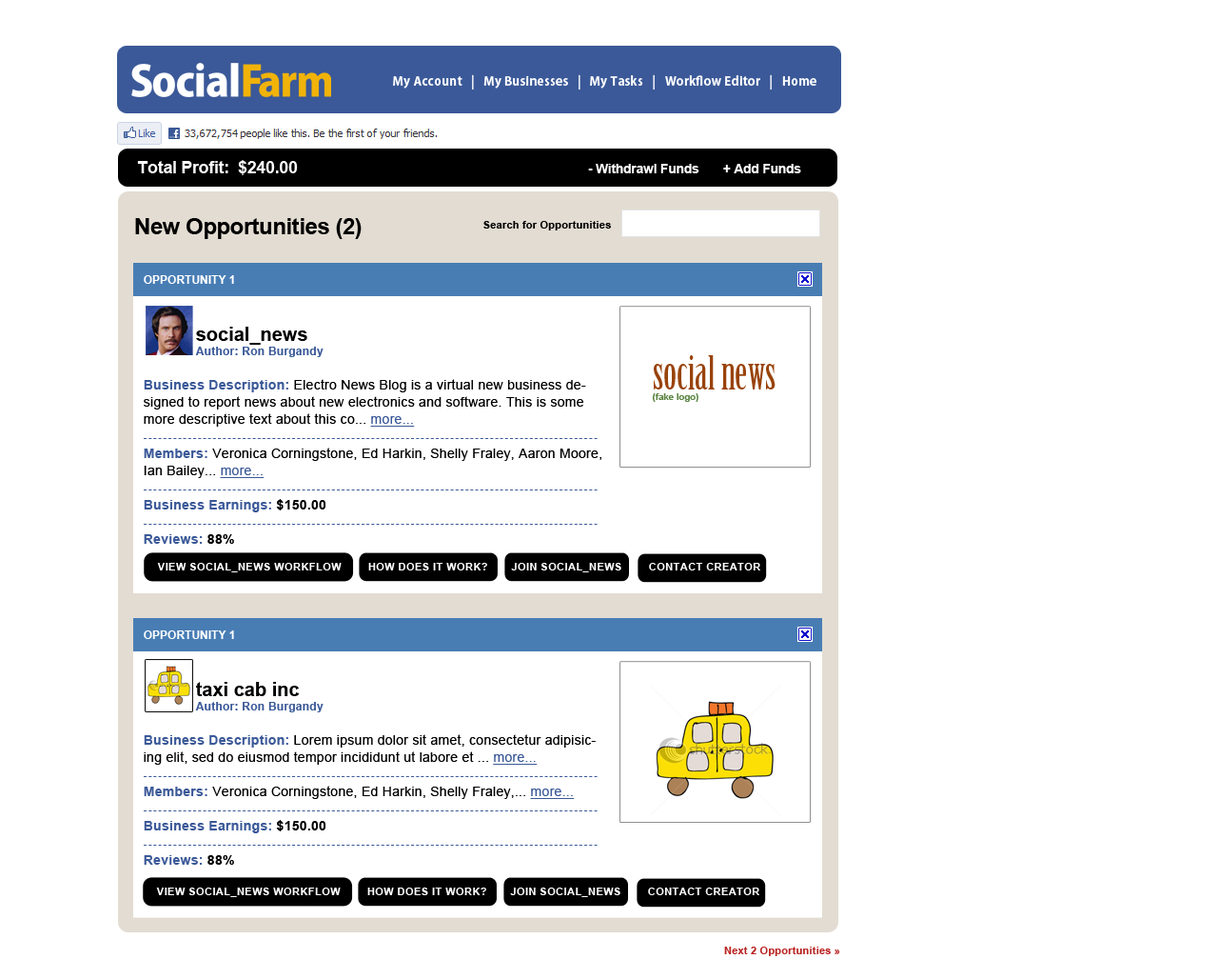
<style>
.page{position:relative;width:1218px;height:979px;background:#ffffff}
.page>*{position:absolute;margin:0}
.t1{font:12.4px "KozGoPro-Bold";letter-spacing:0.02em;color:#ffffff}
.t2{font:13.3px "Arial-BoldMT";letter-spacing:-0.02em;color:#ffffff}
.t3{font:17.1px "Arial-BoldMT";letter-spacing:-0.02em;color:#ffffff}
.t4{font:22.8px "Arial-BoldMT";letter-spacing:-0.02em;color:#000000}
.t5{font:10.5px "Arial-BoldMT";letter-spacing:0.02em;color:#000000}
.t6{font:13.3px/17.1px "ArialMT";letter-spacing:0.02em;color:#000000}
.t7{font:11.4px/14.3px "Arial-BoldMT";color:#ffffff}
.t8{font:19px/14.3px "Arial-BoldMT";color:#000000}
.t9{font:11.4px/14.3px "Arial-BoldMT";letter-spacing:0.02em;color:#3b5998}
.t10{font:13.3px/17.1px "Arial-BoldMT";letter-spacing:0.02em;color:#3b5998}
.t11{font:13.3px/17.1px "ArialMT";letter-spacing:0.02em;color:#3b5998;text-decoration:underline}
.t12{font:10.5px/17.1px "ArialMT";letter-spacing:0.14em;color:#3b5998}
.t13{font:13.3px/17.1px "Arial-BoldMT";letter-spacing:0.02em;color:#000000}
.t14{font:45.8px/10.7px "BirchStd";color:#99430a}
.t15{font:9.2px/10.7px "Arial-BoldMT";color:#5d8645}
.t16{font:10.5px "Arial-BoldMT";letter-spacing:0.04em;color:#ffffff}
.t17{font:10.5px "Arial-BoldMT";letter-spacing:0.02em;color:#b82422}
</style>
<div class="page">
<p class="t1" style="left:393px;top:74px;width:424px;height:15px">My Account   |   My Businesses   |   My Tasks   |   Workflow Editor   |   Home</p>
<p class="t2" style="left:137px;top:160px;width:665px;height:15px"><span class="t3">Total Profit:  $240.00                                                                 </span> - Withdrawl Funds       + Add Funds</p>
<p class="t4" style="left:135px;top:218px;width:227px;height:21px">New Opportunities (2)</p>
<p class="t5" style="left:484px;top:221px;width:127px;height:9px">Search for Opportunities</p>
<p class="t6" style="left:144px;top:275px;width:458px;height:269px"><span class="t7">OPPORTUNITY 1<br><br><br><br></span><span class="t8">social_news<br></span><span class="t9">Author: Ron Burgandy<br><br></span><span class="t10">Business Description: </span>Electro News Blog is a virtual new business designed to report news about new electronics and software. This is some more descriptive text about this co... <span class="t11">more...<br></span><span class="t12">--------------------------------------------------------------------------------------------<br></span><span class="t10">Members: </span>Veronica Corningstone, Ed Harkin, Shelly Fraley, Aaron Moore, Ian Bailey... <span class="t11">more...<br></span><span class="t12">--------------------------------------------------------------------------------------------<br></span><span class="t10">Business Earnings:</span><span class="t13"> $150.00<br></span><span class="t12">--------------------------------------------------------------------------------------------<br></span><span class="t10">Reviews:</span><span class="t13"> 88%</span></p>
<p class="t14" style="left:652px;top:355px;width:124px;height:47px">social news<br><span class="t15">(fake logo)</span></p>
<p class="t16" style="left:157px;top:563px;width:604px;height:9px">VIEW SOCIAL_NEWS WORKFLOW        HOW DOES IT WORK?       JOIN SOCIAL_NEWS        CONTACT CREATOR</p>
<p class="t6" style="left:144px;top:630px;width:454px;height:234px"><span class="t7">OPPORTUNITY 1<br><br><br><br></span><span class="t8">taxi cab inc<br></span><span class="t9">Author: Ron Burgandy<br><br></span><span class="t10">Business Description: </span>Lorem ipsum dolor sit amet, consectetur adipisicing elit, sed do eiusmod tempor incididunt ut labore et ... <span class="t11">more...<br></span><span class="t12">--------------------------------------------------------------------------------------------<br></span><span class="t10">Members: </span>Veronica Corningstone, Ed Harkin, Shelly Fraley,... <span class="t11">more...<br></span><span class="t12">--------------------------------------------------------------------------------------------<br></span><span class="t10">Business Earnings:</span><span class="t13"> $150.00<br></span><span class="t12">--------------------------------------------------------------------------------------------<br></span><span class="t10">Reviews:</span><span class="t13"> 88%</span></p>
<p class="t16" style="left:156px;top:887px;width:604px;height:10px">VIEW SOCIAL_NEWS WORKFLOW        HOW DOES IT WORK?       JOIN SOCIAL_NEWS        CONTACT CREATOR</p>
<p class="t17" style="left:724px;top:946px;width:117px;height:10px">Next 2 Opportunities »</p>
</div>
